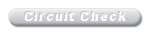
<style>
.page{position:relative;width:150px;height:32px;background:#ffffff}
.page>*{position:absolute;margin:0}
.t1{font:14px "Arial-Black"}
</style>
<div class="page">
<p class="t1" style="left:24px;top:11px;width:102px;height:10px">Circuit Check</p>
</div>
